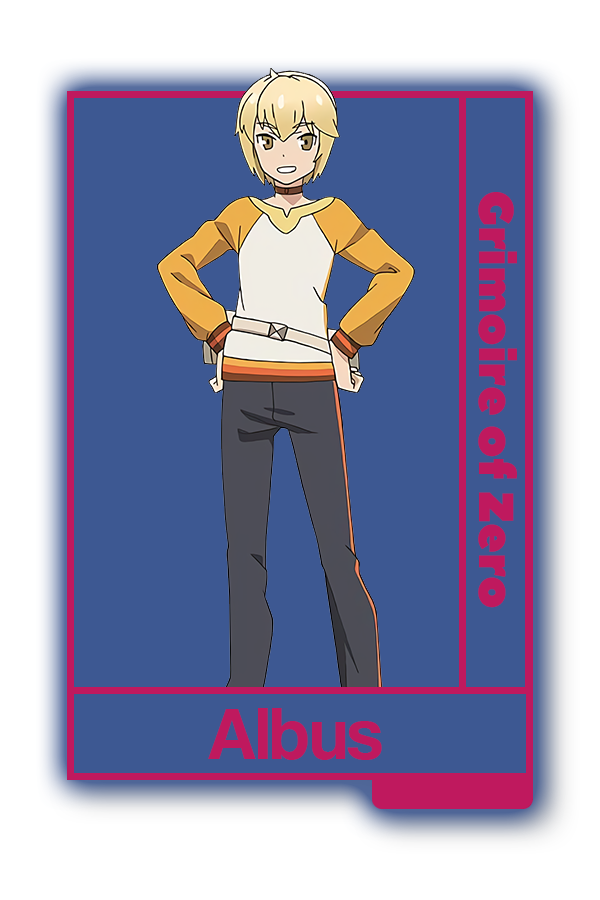
<style>
.page{position:relative;width:600px;height:900px;background:#3d5892}
.page>*{position:absolute;margin:0}
.t1{font:48.8px "PeaceSans";color:#bf195e}
.t2{font:75px "CoolveticaRg-Regular";color:#bf195e}
</style>
<div class="page">
<p class="t1" style="left:478px;top:192px;width:39px;height:416px;rotate:90deg">Grimoire of Zero</p>
<p class="t2" style="left:208px;top:708px;width:174px;height:52px">Albus</p>
</div>
